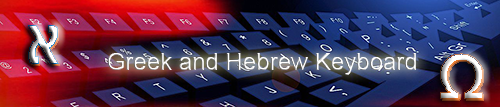
<style>
.page{position:relative;width:500px;height:107px}
.page>*{position:absolute;margin:0}
.t1{font:24px "ArialMT"}
</style>
<div class="page">
<p class="t1" style="left:107px;top:53px;width:309px;height:22px">Greek and Hebrew Keyboard</p>
</div>
